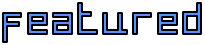
<style>
.page{position:relative;width:205px;height:45px;background:#ffffff}
.page>*{position:absolute;margin:0}
.t1{font:40px "AMOceanus-Bold"}
</style>
<div class="page">
<p class="t1" style="left:3px;top:3px;width:198px;height:39px">f e a t u r e d</p>
</div>
